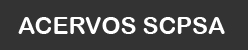
<style>
.page{position:relative;width:248px;height:50px;background:#333333}
.page>*{position:absolute;margin:0}
.t1{font:24px "ArialRoundedMTBold";color:#ffffff}
</style>
<div class="page">
<p class="t1" style="left:18px;top:17px;width:207px;height:17px">ACERVOS SCPSA</p>
</div>
